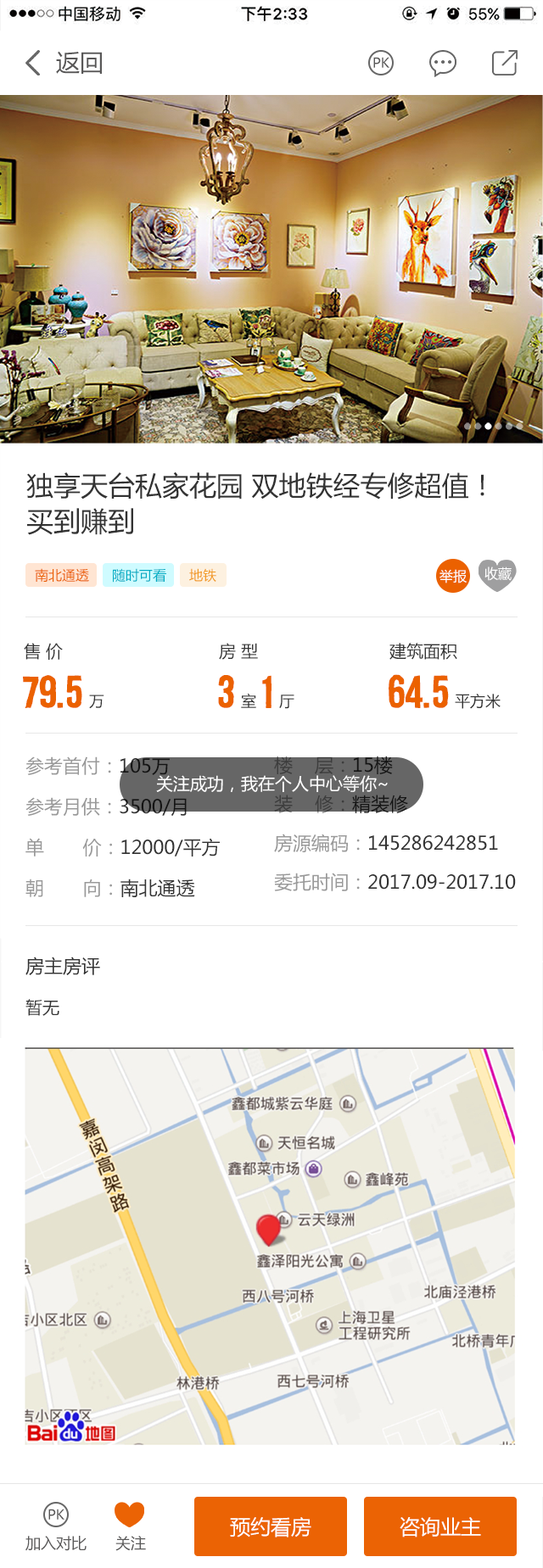
<style>
.page{position:relative;width:543px;height:1568px;background:#ffffff}
.page>*{position:absolute;margin:0}
.t1{font:23.7px "MicrosoftYaHei";color:#585757}
.t2{font:13.6px "MicrosoftYaHei";color:#585757}
.t3{font:27.1px/35.6px "MicrosoftYaHei";color:#333333}
.t4{font:13.6px "MicrosoftYaHei";color:#eb6100}
.t5{font:13.6px "MicrosoftYaHei";color:#00acc3}
.t6{font:13.6px "MicrosoftYaHei";color:#f19a21}
.t7{font:13.6px "MicrosoftYaHei";color:#ffffff}
.t8{font:17px "MicrosoftYaHei";color:#333333}
.t9{font:40.7px "A-FOR-A-Regular";color:#eb6100}
.t10{font:15.3px "MicrosoftYaHei";color:#333333}
.t11{font:18.7px/40.7px "MicrosoftYaHei";color:#999999}
.t12{font:18.7px/40.7px "MicrosoftYaHei";color:#333333}
.t13{font:18.7px/39px "MicrosoftYaHei";color:#333333}
.t14{font:18.7px/39px "MicrosoftYaHei";color:#999999}
.t15{font:17px "MicrosoftYaHei";color:#ffffff}
.t16{font:18.7px "MicrosoftYaHei";color:#333333}
.t17{font:20.4px "MicrosoftYaHei";color:#ffffff}
.t18{font:15.3px "MicrosoftYaHei";color:#585757}
</style>
<div class="page">
<p class="t1" style="left:56px;top:51px;width:46px;height:23px">返回</p>
<p class="t2" style="left:373px;top:57px;width:16px;height:11px">PK</p>
<p class="t3" style="left:26px;top:472px;width:458px;height:63px">独享天台私家花园 双地铁经专修超值！<br>买到赚到</p>
<p class="t4" style="left:35px;top:568px;width:54px;height:14px">南北通透</p>
<p class="t5" style="left:113px;top:568px;width:53px;height:15px">随时可看</p>
<p class="t6" style="left:189px;top:568px;width:27px;height:15px">地铁</p>
<p class="t7" style="left:439px;top:569px;width:27px;height:14px">举报</p>
<p class="t7" style="left:484px;top:566px;width:27px;height:15px">收藏</p>
<p class="t8" style="left:24px;top:643px;width:39px;height:17px">售 价</p>
<p class="t8" style="left:219px;top:643px;width:39px;height:17px">房 型</p>
<p class="t8" style="left:389px;top:643px;width:68px;height:17px">建筑面积</p>
<p class="t9" style="left:23px;top:675px;width:59px;height:33px">79.5</p>
<p class="t9" style="left:218px;top:675px;width:16px;height:33px">3</p>
<p class="t9" style="left:262px;top:675px;width:10px;height:33px">1</p>
<p class="t9" style="left:388px;top:674px;width:61px;height:34px">64.5</p>
<p class="t10" style="left:89px;top:695px;width:15px;height:14px">万</p>
<p class="t10" style="left:241px;top:693px;width:15px;height:15px">室</p>
<p class="t10" style="left:279px;top:695px;width:15px;height:14px">厅</p>
<p class="t10" style="left:455px;top:694px;width:45px;height:15px">平方米</p>
<p class="t11" style="left:25px;top:756px;width:195px;height:141px">参考首付：<span class="t12">105万<br></span>参考月供：<span class="t12">3500/月<br></span>单       价：<span class="t12">12000/平方<br></span>朝       向：<span class="t12">南北通透</span></p>
<p class="t13" style="left:274px;top:756px;width:242px;height:135px"><span class="t14">楼    层：</span>15楼<br><span class="t14">装    修：</span>精装修<br><span class="t14">房源编码：</span>145286242851<br><span class="t14">委托时间：</span>2017.09-2017.10</p>
<p class="t15" style="left:156px;top:775px;width:232px;height:17px">关注成功，我在个人中心等你~</p>
<p class="t16" style="left:25px;top:957px;width:75px;height:18px">房主房评</p>
<p class="t8" style="left:25px;top:999px;width:34px;height:17px">暂无</p>
<p class="t2" style="left:48px;top:1509px;width:16px;height:11px">PK</p>
<p class="t17" style="left:230px;top:1517px;width:81px;height:20px">预约看房</p>
<p class="t17" style="left:399px;top:1517px;width:82px;height:20px">咨询业主</p>
<p class="t18" style="left:25px;top:1536px;width:61px;height:15px">加入对比</p>
<p class="t18" style="left:115px;top:1536px;width:31px;height:15px">关注</p>
</div>
